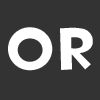
<style>
.page{position:relative;width:100px;height:100px;background:#333333}
.page>*{position:absolute;margin:0}
.t1{font:60px "TF2Build";letter-spacing:0.1em;color:#ffffff}
</style>
<div class="page">
<p class="t1" style="left:8px;top:27px;width:85px;height:44px">or</p>
</div>
